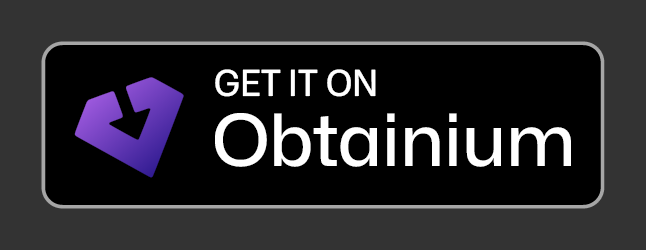
<style>
.page{position:relative;width:646px;height:250px;background:#000000}
.page>*{position:absolute;margin:0}
.t1{font:36px "MonaSans_95.000wdth_500.000wght";color:#ffffff}
.t2{font:72px "MonaSans-Medium";color:#ffffff}
</style>
<div class="page">
<p class="t1" style="left:215px;top:69px;width:161px;height:28px">GET IT ON</p>
<p class="t2" style="left:215px;top:113px;width:356px;height:54px">Obtainium</p>
</div>
